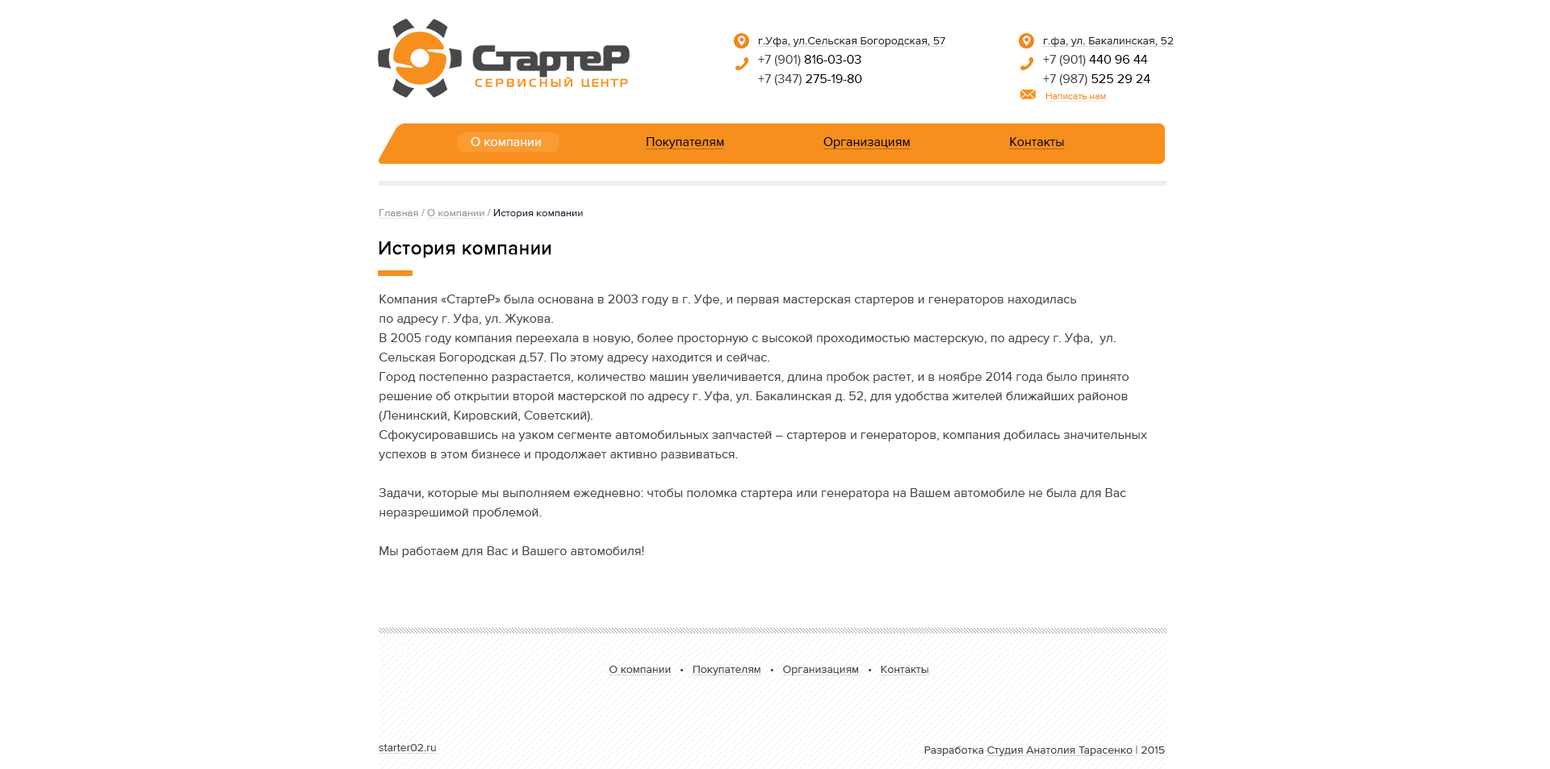
<style>
.page{position:relative;width:1550px;height:769px;background:#ffffff}
.page>*{position:absolute;margin:0}
.t1{font:11.3px/19.4px "amlgjlahnkgmkjoldgbpeifodofplkkf";color:#282828;text-decoration:underline}
.t2{font:12.9px/19.4px "amlgjlahnkgmkjoldgbpeifodofplkkf";color:#48484a}
.t3{font:12.9px/19.4px "amlgjlahnkgmkjoldgbpeifodofplkkf";color:#000000}
.t4{font:9.7px "amlgjlahnkgmkjoldgbpeifodofplkkf";color:#f68f1e;text-decoration:underline}
.t5{font:12.9px "amlgjlahnkgmkjoldgbpeifodofplkkf";color:#ffffff}
.t6{font:12.9px "amlgjlahnkgmkjoldgbpeifodofplkkf";color:#000000;text-decoration:underline}
.t7{font:10.5px "amlgjlahnkgmkjoldgbpeifodofplkkf";color:#2c1a37}
.t8{font:10.5px "amlgjlahnkgmkjoldgbpeifodofplkkf";color:#969696;text-decoration:underline}
.t9{font:10.5px "amlgjlahnkgmkjoldgbpeifodofplkkf";color:#969696}
.t10{font:19.4px "amlgjlahnkgmkjoldgbpeifodofplkkf";color:#010101;font-weight:bold}
.t11{font:11.3px "amlgjlahnkgmkjoldgbpeifodofplkkf";color:#48484a;text-decoration:underline}
.t12{font:11.3px "amlgjlahnkgmkjoldgbpeifodofplkkf";color:#48484a}
</style>
<div class="page">
<p class="t1" style="left:758px;top:37px;width:188px;height:49px">г.Уфа, ул.Сельская Богородская, 57<br><span class="t2">+7 (901)</span><span class="t3"> 816-03-03<br></span><span class="t2">+7 (347)</span><span class="t3"> 275-19-80</span></p>
<p class="t1" style="left:1043px;top:37px;width:131px;height:49px">г.фа, ул. Бакалинская, 52<br><span class="t2">+7 (901)</span><span class="t3"> 440 96 44<br></span><span class="t2">+7 (987)</span><span class="t3"> 525 29 24</span></p>
<p class="t4" style="left:1045px;top:93px;width:62px;height:9px">Написать нам</p>
<p class="t5" style="left:471px;top:137px;width:70px;height:9px">О компании</p>
<p class="t6" style="left:646px;top:137px;width:419px;height:12px">Покупателям      Организациям      Контакты</p>
<p class="t7" style="left:379px;top:209px;width:204px;height:10px"><span class="t8">Главная</span><span class="t9"> / </span><span class="t8">О компании</span><span class="t9"> /</span> История компании</p>
<p class="t10" style="left:379px;top:241px;width:172px;height:17px">История компании</p>
<p class="t2" style="left:379px;top:295px;width:768px;height:263px">Компания «СтартеР» была основана в 2003 году в г. Уфе, и первая мастерская стартеров и генераторов находилась <br>по адресу г. Уфа, ул. Жукова.<br>В 2005 году компания переехала в новую, более просторную с высокой проходимостью мастерскую, по адресу г. Уфа,  ул. Сельская Богородская д.57. По этому адресу находится и сейчас.<br>Город постепенно разрастается, количество машин увеличивается, длина пробок растет, и в ноябре 2014 года было принято решение об открытии второй мастерской по адресу г. Уфа, ул. Бакалинская д. 52, для удобства жителей ближайших районов (Ленинский, Кировский, Советский).<br>Сфокусировавшись на узком сегменте автомобильных запчастей – стартеров и генераторов, компания добилась значительных успехов в этом бизнесе и продолжает активно развиваться. <br><br>Задачи, которые мы выполняем ежедневно: чтобы поломка стартера или генератора на Вашем автомобиле не была для Вас неразрешимой проблемой.<br><br>Мы работаем для Вас и Вашего автомобиля!</p>
<p class="t11" style="left:609px;top:666px;width:320px;height:10px">О компании<span class="t12">   •   </span>Покупателям<span class="t12">   •   </span>Организациям<span class="t12">   •   </span>Контакты</p>
<p class="t11" style="left:379px;top:744px;width:58px;height:10px">starter02.ru</p>
<p class="t11" style="left:924px;top:746px;width:241px;height:10px"><span class="t12">Разработка </span>Студия Анатолия Тарасенко<span class="t12"> | 2015</span></p>
</div>
